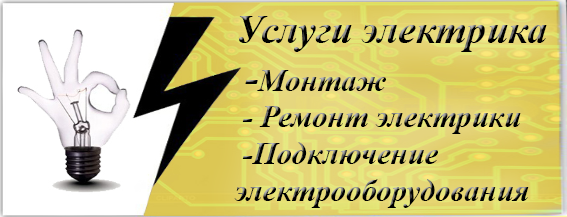
<style>
.page{position:relative;width:567px;height:217px}
.page>*{position:absolute;margin:0}
.t1{font:30.7px "TimesNewRomanPS-BoldItalicMT"}
.t2{font:39.7px "TimesNewRomanPS-BoldItalicMT"}
</style>
<div class="page">
<p class="t1" style="left:234px;top:16px;width:313px;height:192px;text-align:right"><span class="t2">Услуги электрика<br> -</span>Монтаж<br> - Ремонт электрики<br> -Подключение  электрооборудования</p>
</div>
